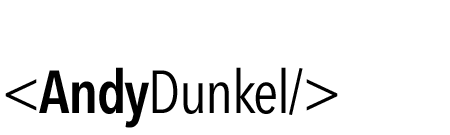
<style>
.page{position:relative;width:450px;height:135px;background:#ffffff}
.page>*{position:absolute;margin:0}
.t1{font:60px "AvenirNextCondensed-Regular";letter-spacing:-0.03em;color:#000000}
.t2{font:60px "AvenirNext-Regular";letter-spacing:-0.03em;color:#000000}
.t3{font:60px "AvenirNextCondensed-DemiBold";letter-spacing:-0.03em;color:#000000}
</style>
<div class="page">
<p class="t1" style="left:5px;top:67px;width:333px;height:61px"><span class="t2">&lt;</span><span class="t3">Andy</span>Dunkel/&gt;</p>
</div>
